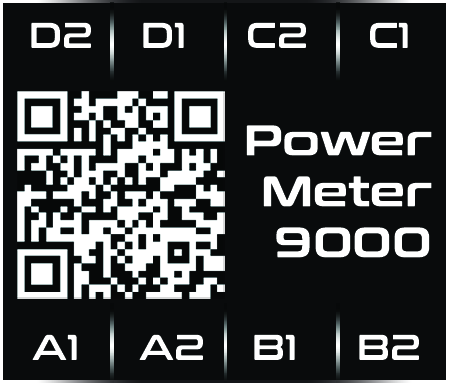
<style>
.page{position:relative;width:449px;height:383px;background:#090b0c}
.page>*{position:absolute;margin:0}
.t1{font:35.7px "ConthraxSb-Regular";color:#ffffff}
.t2{font:42.6px "ConthraxSb-Regular";color:#ffffff;font-weight:bold}
</style>
<div class="page">
<p class="t1" style="left:31px;top:22px;width:377px;height:26px">D2    D1     C2     C1</p>
<p class="t2" style="left:246px;top:125px;width:186px;height:133px;text-align:right">Power<br>Meter<br>9000</p>
<p class="t1" style="left:32px;top:334px;width:387px;height:26px">A1     A2    B1     B2</p>
</div>
